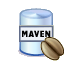
<style>
.page{position:relative;width:75px;height:66px;background:#ffffff}
.page>*{position:absolute;margin:0}
.t1{font:9px "Humanist521BT-XtraBoldCondensed";letter-spacing:0.05em;color:#000000;font-variant:small-caps}
</style>
<div class="page">
<p class="t1" style="left:22px;top:30px;width:29px;height:7px">MAVEN</p>
</div>
